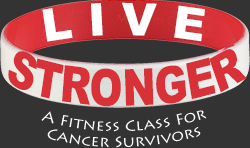
<style>
.page{position:relative;width:250px;height:148px;background:#333333}
.page>*{position:absolute;margin:0}
.t1{font:15px "LithosPro-Regular";color:#ffffff;scale:1.1 1}
</style>
<div class="page">
<p class="t1" style="left:41px;top:110px;width:166px;height:22px">A Fitness Class For</p>
<p class="t1" style="left:47px;top:127px;width:154px;height:21px">Cancer Survivors</p>
</div>
